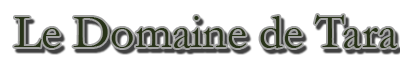
<style>
.page{position:relative;width:400px;height:75px;background:#ffffff}
.page>*{position:absolute;margin:0}
.t1{font:48px "Garamond";color:#283319}
</style>
<div class="page">
<p class="t1" style="left:14px;top:15px;width:384px;height:33px">Le Domaine de Tara</p>
</div>
